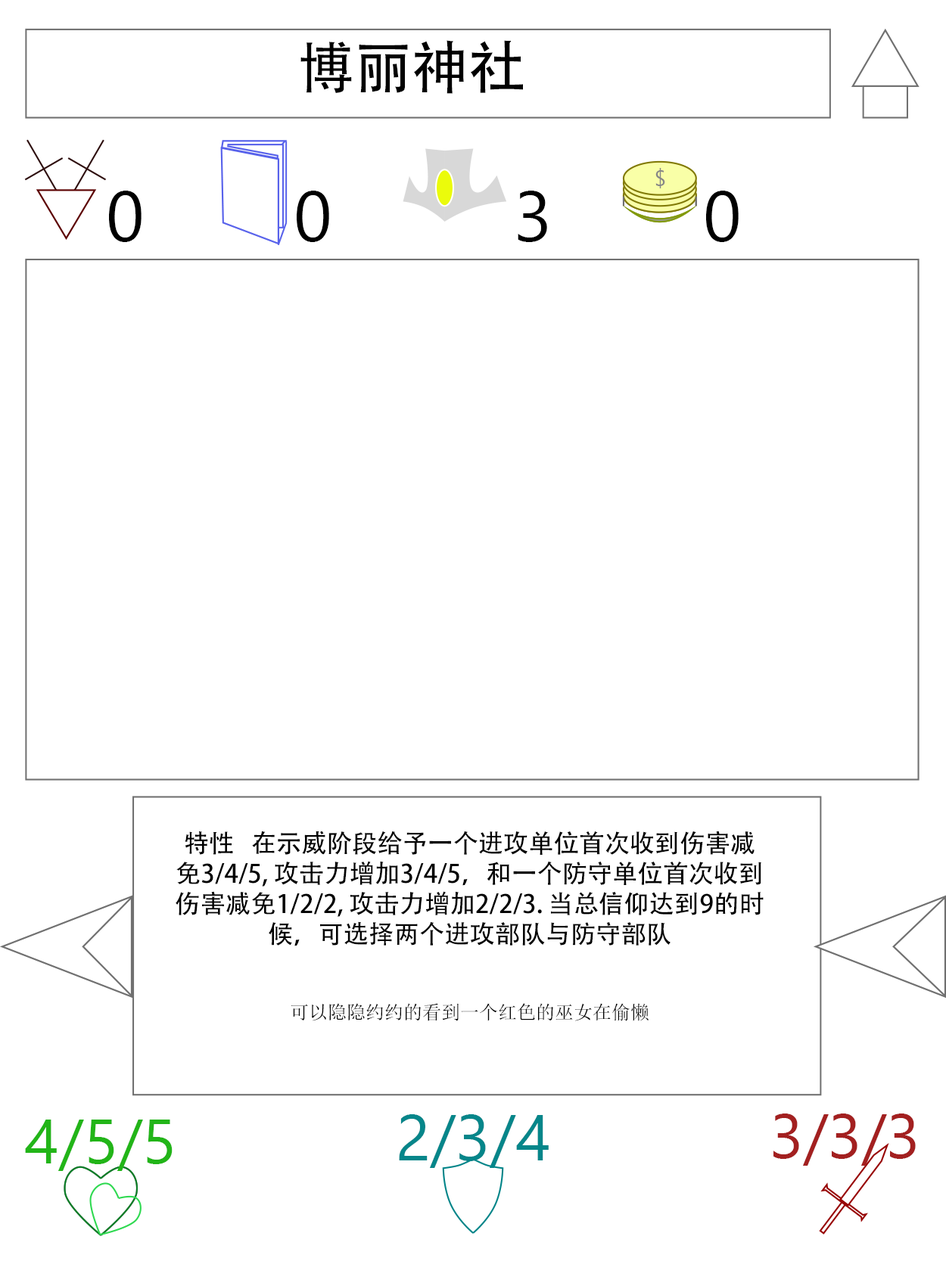
<style>
.page{position:relative;width:946px;height:1261px;background:#ffffff}
.page>*{position:absolute;margin:0}
.t1{font:56.7px "AdobeHeitiStd-Regular";color:#000000}
.t2{font:70.9px "SegoeUI";color:#000000}
.t3{font:25.2px "AdobeHeitiStd-Regular";color:#000000}
.t4{font:18.9px "SimSun";color:#000000}
.t5{font:63px "SegoeUI";color:#22b518}
.t6{font:64.6px "SegoeUI";color:#05868a}
.t7{font:63px "SegoeUI";color:#a32020}
</style>
<div class="page">
<p class="t1" style="left:300px;top:40px;width:223px;height:54px">博丽神社</p>
<p class="t2" style="left:109px;top:191px;width:32px;height:51px">0</p>
<p class="t2" style="left:297px;top:191px;width:32px;height:51px">0</p>
<p class="t2" style="left:517px;top:191px;width:30px;height:51px">3</p>
<p class="t2" style="left:706px;top:191px;width:32px;height:51px">0</p>
<p class="t3" style="left:176px;top:831px;width:587px;height:190px;text-align:center">特性   在示威阶段给予一个进攻单位首次收到伤害减免3/4/5, 攻击力增加3/4/5，和一个防守单位首次收到伤害减免1/2/2, 攻击力增加2/2/3. 当总信仰达到9的时候，可选择两个进攻部队与防守部队<br><br><br><span class="t4">可以隐隐约约的看到一个红色的巫女在偷懒</span></p>
<p class="t5" style="left:25px;top:1120px;width:147px;height:51px">4/5/5</p>
<p class="t6" style="left:399px;top:1114px;width:149px;height:54px">2/3/4</p>
<p class="t7" style="left:773px;top:1114px;width:142px;height:52px">3/3/3</p>
</div>
